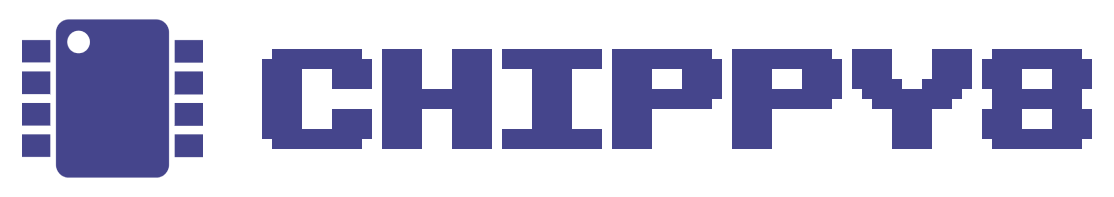
<style>
.page{position:relative;width:1114px;height:197px;background:#ffffff}
.page>*{position:absolute;margin:0}
.t1{font:200px "UpheavalTT-BRK-";color:#45458c}
</style>
<div class="page">
<p class="t1" style="left:261px;top:48px;width:831px;height:101px">Chippy8</p>
</div>
